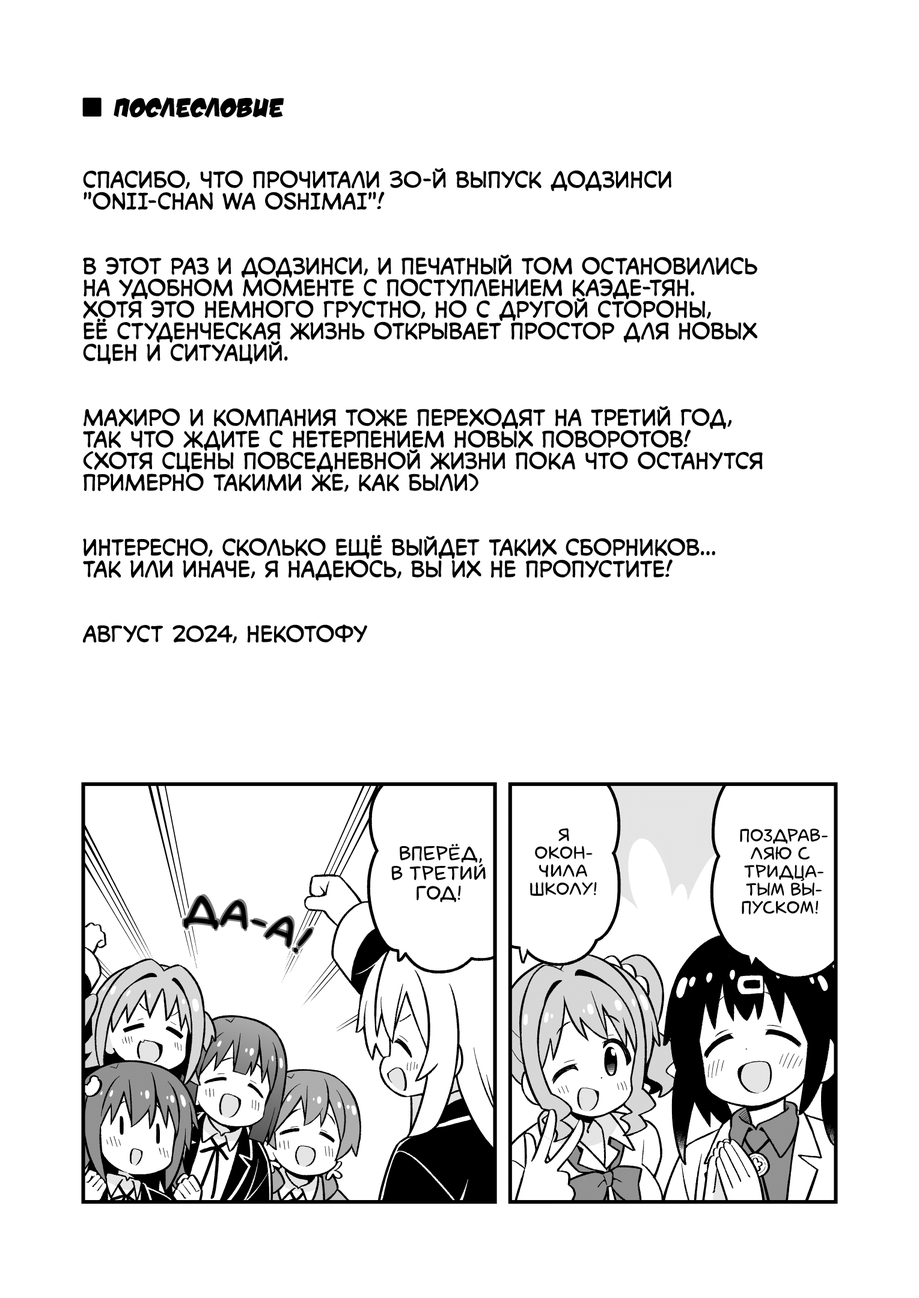
<style>
.page{position:relative;width:919px;height:1298px;background:#ffffff}
.page>*{position:absolute;margin:0}
.t1{font:27px "v_DamnNoisyKids";color:#000000;text-transform:uppercase}
.t2{font:21.6px "v_CCMonologous";color:#000000;text-transform:uppercase}
.t3{font:18px "laCartoonerie";color:#000000;text-transform:uppercase}
.t4{font:19.8px "laCartoonerie";color:#000000;text-transform:uppercase}
.t5{font:39.7px "laCartoonerie";color:#000000;text-transform:uppercase}
</style>
<div class="page">
<p class="t1" style="left:114px;top:97px;width:170px;height:21px">Послесловие</p>
<p class="t2" style="left:82px;top:168px;width:681px;height:476px">Спасибо, что прочитали 30-й выпуск додзинси<br>"Onii-chan wa Oshimai"!<br><br><br>В этот раз и додзинси, и печатный том остановились<br>на удобном моменте с поступлением Каэде-тян.<br>Хотя это немного грустно, но с другой стороны,<br>её студенческая жизнь открывает простор для новых<br>сцен и ситуаций.<br><br><br>Махиро и компания тоже переходят на третий год,<br>так что ждите с нетерпением новых поворотов!<br>(хотя сцены повседневной жизни пока что останутся<br>примерно такими же, как были)<br><br><br>Интересно, сколько ещё выйдет таких сборников...<br>Так или иначе, я надеюсь, вы их не пропустите!<br><br><br>Август 2024, Некотофу</p>
<p class="t3" style="left:530px;top:828px;width:67px;height:68px;text-align:center">Я<br>окон-<br>чила<br>школу!</p>
<p class="t3" style="left:740px;top:829px;width:87px;height:86px;text-align:center">Поздрав-<br>ляю с<br>тридца-<br>тым вы-<br>пуском!</p>
<p class="t4" style="left:391px;top:844px;width:95px;height:59px;text-align:center">Вперёд,<br>в третий<br>год!</p>
<p class="t5" style="left:181px;top:895px;width:130px;height:57px;rotate:15deg;opacity:0.5">Да-а!</p>
<p class="t5" style="left:183px;top:896px;width:129px;height:57px;rotate:15deg">Да-а!</p>
<p class="t5" style="left:184px;top:898px;width:129px;height:57px;rotate:15deg;opacity:0.5">Да-а!</p>
<p class="t5" style="left:185px;top:894px;width:129px;height:57px;rotate:15deg;opacity:0.5">Да-а!</p>
</div>
